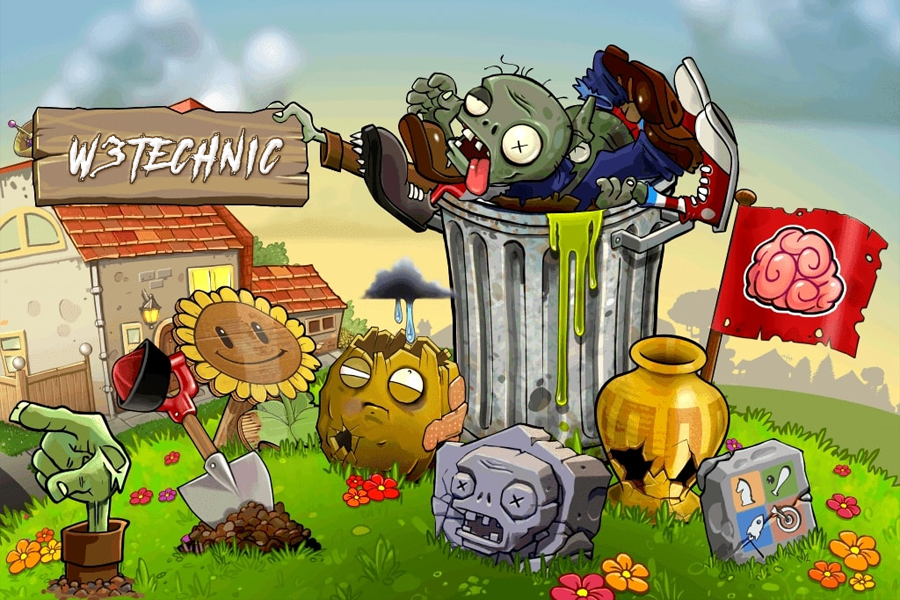
<style>
.page{position:relative;width:900px;height:600px}
.page>*{position:absolute;margin:0}
.t1{font:36.3px "AnotherDangerDemo";letter-spacing:0.17em;color:#ffffff;text-transform:uppercase}
.t2{font:75.3px "BlackadderITC-Regular";letter-spacing:0.17em;color:#ffffff;text-transform:uppercase}
</style>
<div class="page">
<p class="t1" style="left:70px;top:129px;width:213px;height:54px">w<span class="t2">3</span>technic</p>
</div>
